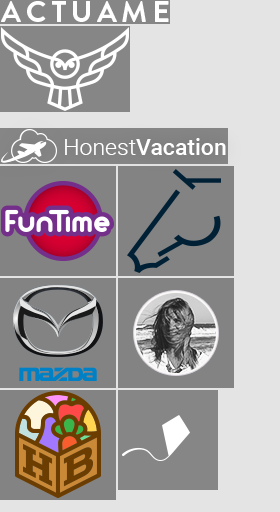
<style>
.page{position:relative;width:280px;height:512px;background:#e4e4e4}
.page>*{position:absolute;margin:0}
.t1{font:30px "BrandonGrotesque-Bold";letter-spacing:0.16em;color:#ffffff;text-transform:uppercase}
.t2{font:23px "Roboto-Medium";color:#ffffff}
.t3{font:23px "Roboto-Light";color:#ffffff}
</style>
<div class="page">
<p class="t1" style="left:1px;top:1px;width:168px;height:21px">Actuame</p>
<p class="t2" style="left:65px;top:138px;width:161px;height:17px"><span class="t3">Honest</span>Vacation</p>
</div>
